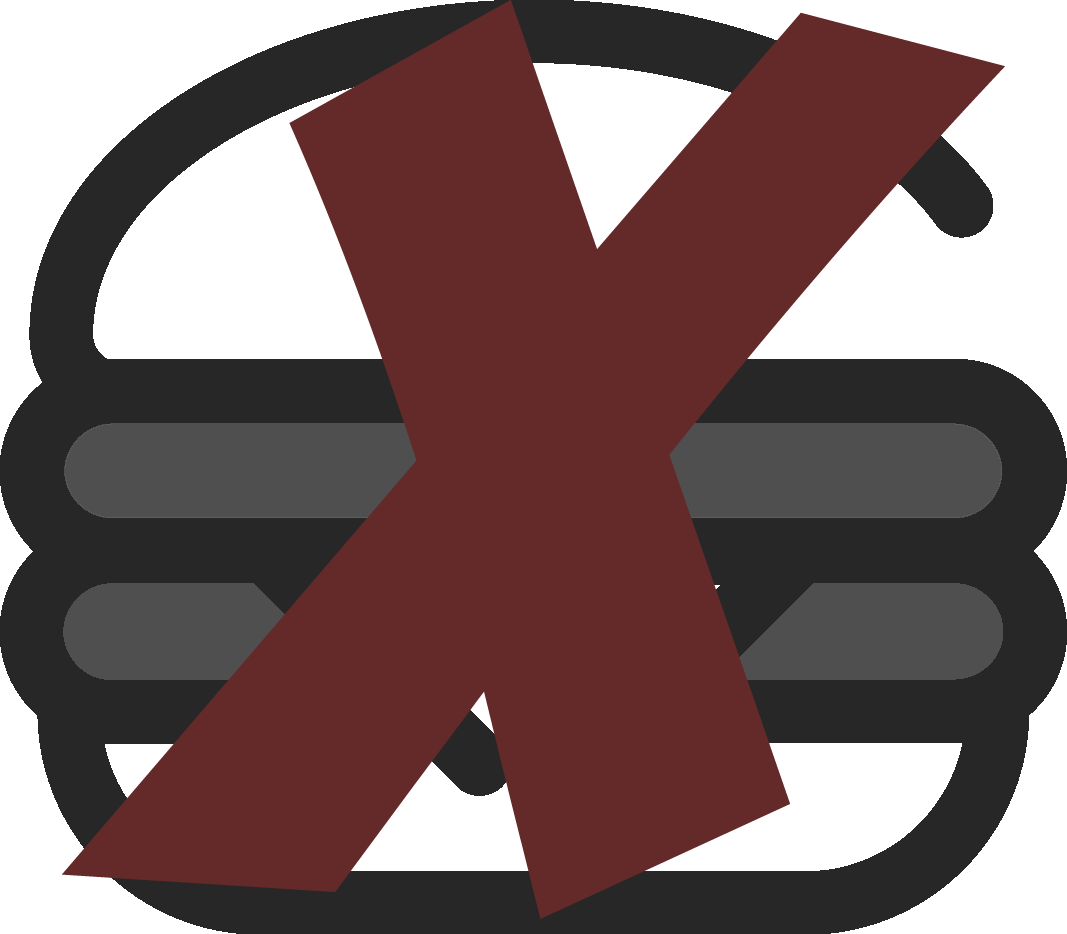
<style>
.page{position:relative;width:1067px;height:934px;background:#642929}
.page>*{position:absolute;margin:0}
.t1{font:1187.5px "BadaBoomBB";color:#642929;scale:1.35 1}
</style>
<div class="page">
<p class="t1" style="left:62px;top:0px;width:943px;height:919px">X</p>
</div>
